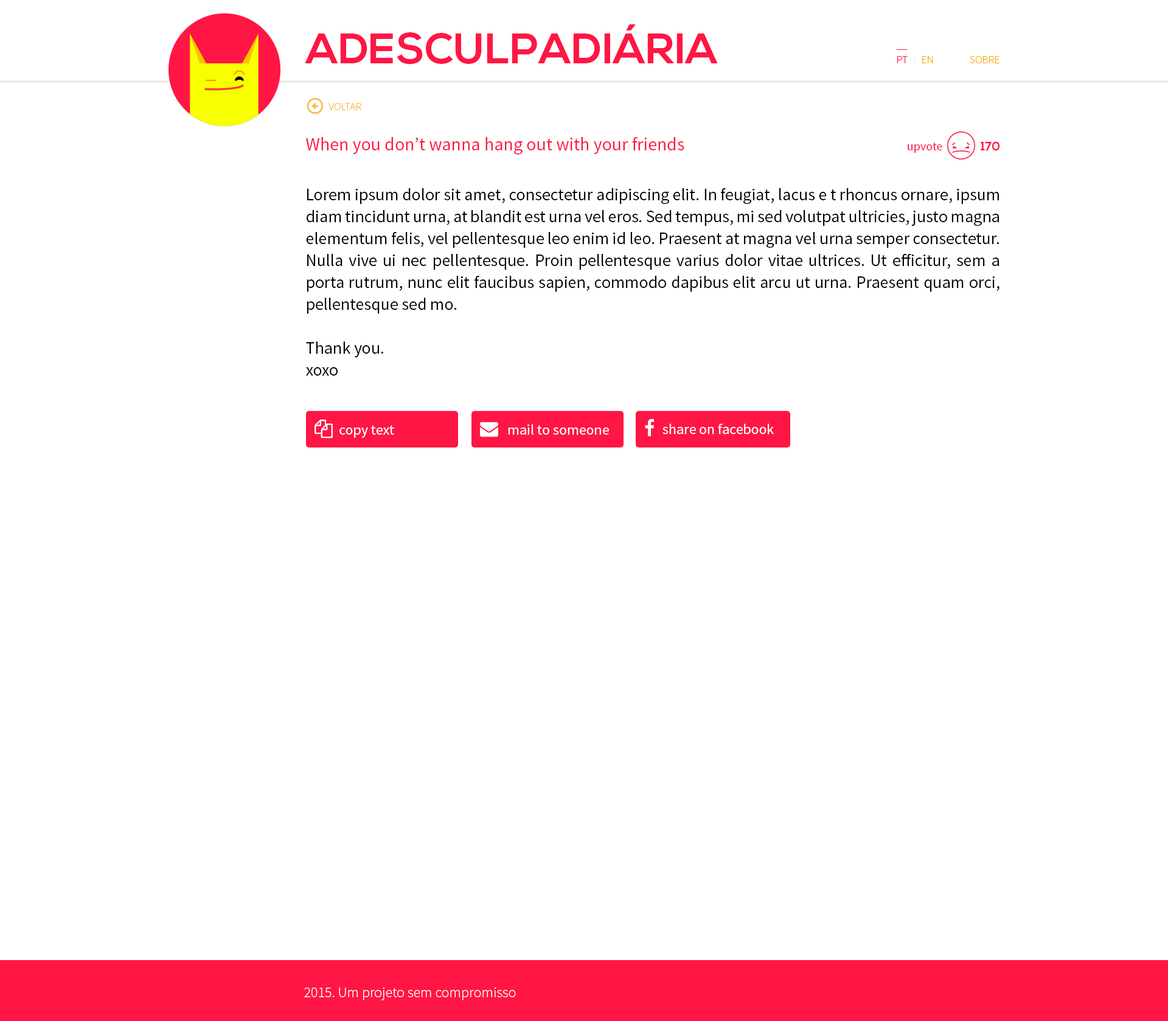
<style>
.page{position:relative;width:1168px;height:1021px;background:#ffffff}
.page>*{position:absolute;margin:0}
.t1{font:42.6px "NexaBold";color:#ff1644}
.t2{font:11px "SourceSansPro-Light";color:#ff1644}
.t3{font:11px "SourceSansPro-Light";color:#f8a900}
.t4{font:11px "SourceSansPro-Light";color:#f9b642}
.t5{font:18.3px "SourceSansPro-Regular";color:#ff1644}
.t6{font:12.2px "SourceSansPro-Regular";color:#ff1644}
.t7{font:12.2px "NexaBold";color:#ff1644}
.t8{font:17px/21.9px "SourceSansPro-Regular";color:#000000}
.t9{font:14.6px "SourceSansPro-Regular";color:#ffffff}
.t10{font:14.6px "SourceSansPro-Light";color:#ffffff}
</style>
<div class="page">
<p class="t1" style="left:305px;top:24px;width:413px;height:41px">ADESCULPADIÁRIA</p>
<p class="t2" style="left:898px;top:56px;width:10px;height:7px">PT</p>
<p class="t3" style="left:923px;top:56px;width:11px;height:7px">EN</p>
<p class="t3" style="left:970px;top:56px;width:30px;height:7px">SOBRE</p>
<p class="t4" style="left:329px;top:103px;width:33px;height:7px">VOLTAR</p>
<p class="t5" style="left:306px;top:137px;width:379px;height:18px">When you don’t wanna hang out with your friends</p>
<p class="t6" style="left:908px;top:142px;width:35px;height:11px">upvote</p>
<p class="t7" style="left:981px;top:141px;width:19px;height:10px">170</p>
<p class="t8" style="left:306px;top:188px;width:694px;height:187px;text-align:justify">Lorem ipsum dolor sit amet, consectetur adipiscing elit. In feugiat, lacus e t rhoncus ornare, ipsum diam tincidunt urna, at blandit est urna vel eros. Sed tempus, mi sed volutpat ultricies, justo magna elementum felis, vel pellentesque leo enim id leo. Praesent at magna vel urna semper consectetur. Nulla vive ui nec pellentesque. Proin pellentesque varius dolor vitae ultrices. Ut efficitur, sem a porta rutrum, nunc elit faucibus sapien, commodo dapibus elit arcu ut urna. Praesent quam orci, pellentesque sed mo.<br><br>Thank you.<br>xoxo</p>
<p class="t9" style="left:340px;top:425px;width:54px;height:13px">copy text</p>
<p class="t9" style="left:508px;top:424px;width:101px;height:11px">mail to someone</p>
<p class="t9" style="left:663px;top:424px;width:111px;height:10px">share on facebook</p>
<p class="t10" style="left:304px;top:986px;width:212px;height:14px">2015. Um projeto sem compromisso</p>
</div>
